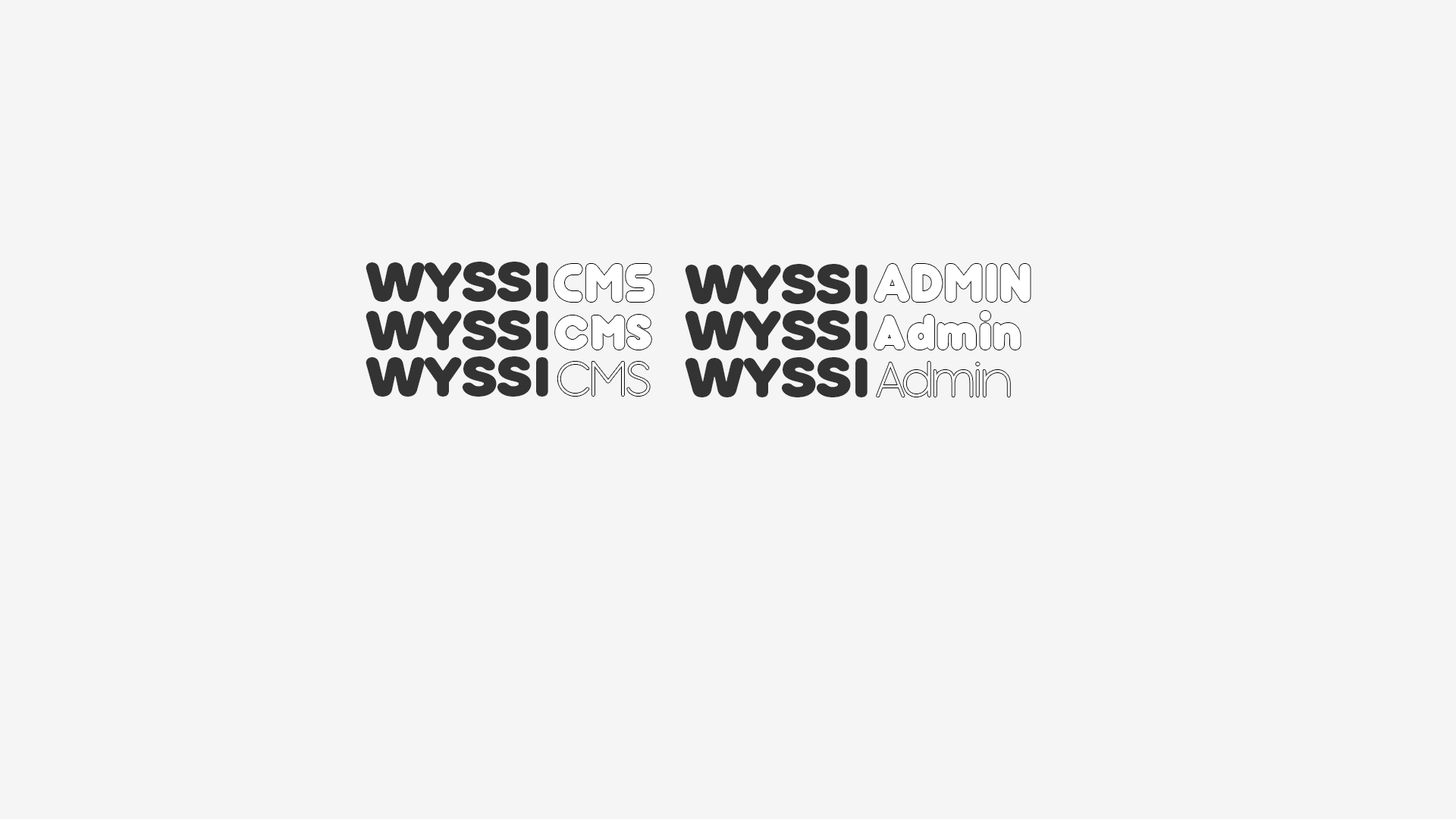
<style>
.page{position:relative;width:1456px;height:819px;background:#f5f5f5}
.page>*{position:absolute;margin:0}
.t1{font:54.6px "RoundsBlack";color:#333333}
.t2{font:63px "Junegull";color:#ffffff}
.t3{font:54.6px "bubbleboddy-Fat";color:#ffffff}
</style>
<div class="page">
<p class="t1" style="left:366px;top:262px;width:182px;height:40px">WYSSI</p>
<p class="t2" style="left:554px;top:264px;width:100px;height:38px">CMS</p>
<p class="t1" style="left:685px;top:264px;width:183px;height:40px">WYSSI</p>
<p class="t2" style="left:874px;top:264px;width:157px;height:38px">Admin</p>
<p class="t1" style="left:366px;top:310px;width:182px;height:40px">WYSSI</p>
<p class="t3" style="left:555px;top:315px;width:96px;height:35px">CMS</p>
<p class="t1" style="left:685px;top:310px;width:183px;height:40px">WYSSI</p>
<p class="t3" style="left:874px;top:311px;width:147px;height:39px">Admin</p>
<p class="t1" style="left:366px;top:356px;width:182px;height:41px">WYSSI</p>
<p class="t1" style="left:685px;top:357px;width:183px;height:40px">WYSSI</p>
</div>
